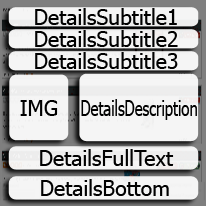
<style>
.page{position:relative;width:206px;height:206px;background:#f5f5f5}
.page>*{position:absolute;margin:0}
.t1{font:21.2px "Tahoma";color:#010101}
.t2{font:21.2px "Tahoma";color:#010101;scale:0.7 1}
</style>
<div class="page">
<p class="t1" style="left:35px;top:8px;width:142px;height:17px">DetailsSubtitle1</p>
<p class="t1" style="left:35px;top:30px;width:143px;height:17px">DetailsSubtitle2</p>
<p class="t1" style="left:35px;top:52px;width:143px;height:17px">DetailsSubtitle3</p>
<p class="t1" style="left:20px;top:100px;width:38px;height:16px">IMG</p>
<p class="t2" style="left:81px;top:99px;width:116px;height:21px">DetailsDescription</p>
<p class="t1" style="left:40px;top:149px;width:134px;height:17px">DetailsFullText</p>
<p class="t1" style="left:41px;top:179px;width:128px;height:17px">DetailsBottom</p>
</div>
